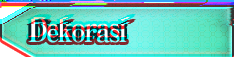
<style>
.page{position:relative;width:234px;height:57px}
.page>*{position:absolute;margin:0}
.t1{font:27px "RyuminPro-ExBold";letter-spacing:-0.08em}
</style>
<div class="page">
<p class="t1" style="left:28px;top:16px;width:99px;height:22px">Dekorasi</p>
</div>
